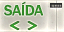
<style>
.page{position:relative;width:64px;height:32px}
.page>*{position:absolute;margin:0}
.t1{font:15.3px "FranklinGothic-Medium";letter-spacing:-0.02em;color:#2f8925;text-transform:uppercase}
</style>
<div class="page">
<p class="t1" style="left:3px;top:1px;width:41px;height:15px">saída</p>
</div>
